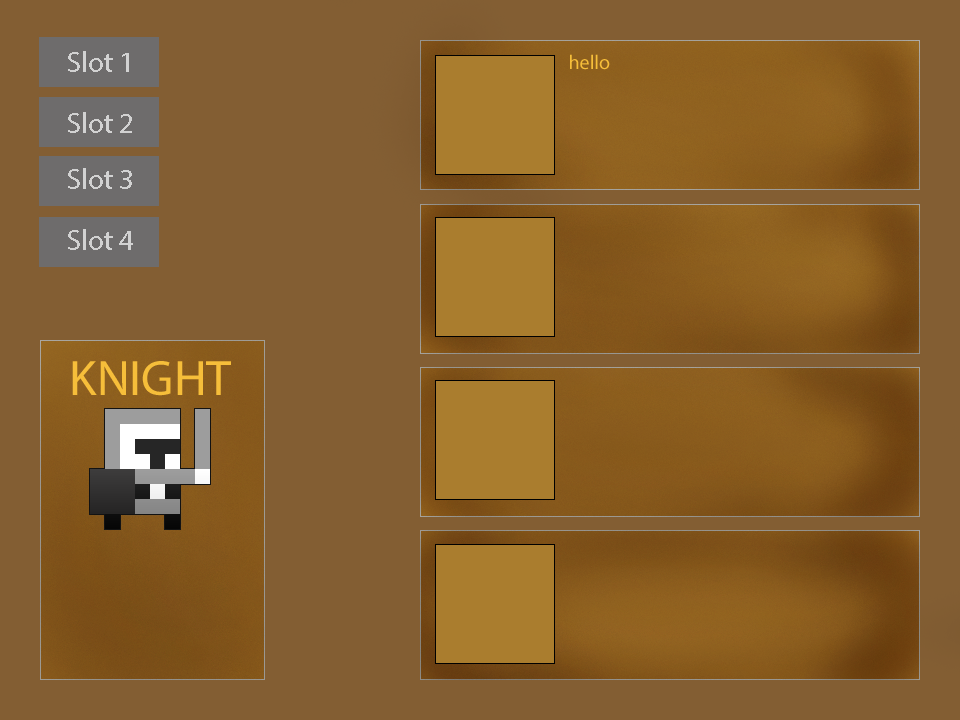
<style>
.page{position:relative;width:960px;height:720px;background:#835e33}
.page>*{position:absolute;margin:0}
.t1{font:29.2px "MyriadPro-Regular";color:#d2d2d2}
.t2{font:125px "MyriadPro-Regular";color:#ffffff}
.t3{font:20px "MyriadPro-Regular";color:#f6be3a}
.t4{font:50px "MyriadPro-Regular";color:#f6be3a}
</style>
<div class="page">
<p class="t1" style="left:68px;top:51px;width:61px;height:21px;text-align:center">Slot 1<br><span class="t2">hERO</span></p>
<p class="t3" style="left:570px;top:54px;width:40px;height:16px">hello</p>
<p class="t1" style="left:68px;top:112px;width:64px;height:21px;text-align:center">Slot 2<br><span class="t2">hERO</span></p>
<p class="t1" style="left:68px;top:168px;width:64px;height:21px;text-align:center">Slot 3<br><span class="t2">hERO</span></p>
<p class="t1" style="left:68px;top:229px;width:65px;height:21px;text-align:center">Slot 4<br><span class="t2">hERO</span></p>
<p class="t4" style="left:72px;top:361px;width:159px;height:35px">KNIGHT</p>
</div>
